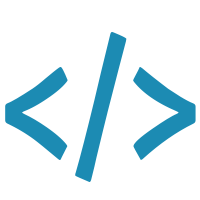
<style>
.page{position:relative;width:200px;height:200px;background:#ffffff}
.page>*{position:absolute;margin:0}
.t1{font:201.1px "BerlinSansFB-Reg";color:#1c8cb4}
</style>
<div class="page">
<p class="t1" style="left:5px;top:31px;width:191px;height:151px">&lt;/&gt;</p>
</div>
